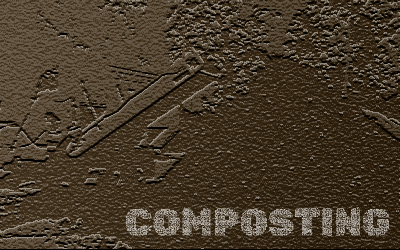
<style>
.page{position:relative;width:400px;height:250px}
.page>*{position:absolute;margin:0}
.t1{font:38px "RubikMaze-Regular"}
</style>
<div class="page">
<p class="t1" style="left:126px;top:208px;width:263px;height:28px">COMPOSTING</p>
</div>
